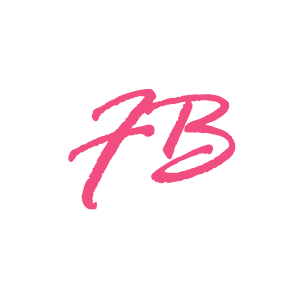
<style>
.page{position:relative;width:300px;height:300px;background:#ffffff}
.page>*{position:absolute;margin:0}
.t1{font:150px "RageItalic";letter-spacing:-0.05em;color:#f24d81}
</style>
<div class="page">
<p class="t1" style="left:68px;top:89px;width:168px;height:121px">FB</p>
</div>
